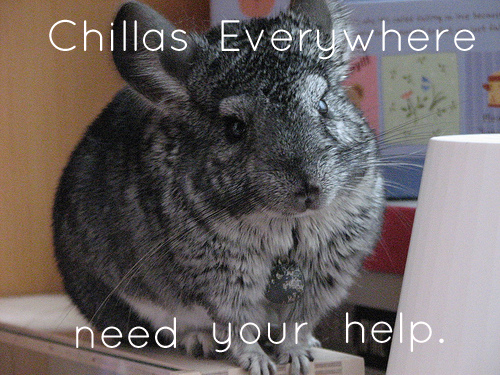
<style>
.page{position:relative;width:500px;height:375px}
.page>*{position:absolute;margin:0}
.t1{font:44px "QuicksandBook-Regular";color:#ffffff}
.t2{font:44px "QuicksandBook-Regular";color:#fffdfd}
</style>
<div class="page">
<p class="t1" style="left:49px;top:19px;width:138px;height:32px">Chillas</p>
<p class="t1" style="left:221px;top:20px;width:254px;height:40px">Everywhere</p>
<p class="t2" style="left:76px;top:317px;width:100px;height:31px">need</p>
<p class="t2" style="left:346px;top:312px;width:98px;height:40px">help.</p>
<p class="t2" style="left:213px;top:322px;width:95px;height:31px">your</p>
</div>
